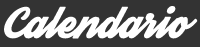
<style>
.page{position:relative;width:200px;height:47px;background:#333333}
.page>*{position:absolute;margin:0}
.t1{font:31px "Streetwear";color:#ffffff;font-weight:bold}
</style>
<div class="page">
<p class="t1" style="left:4px;top:6px;width:194px;height:33px">Calendario</p>
</div>
